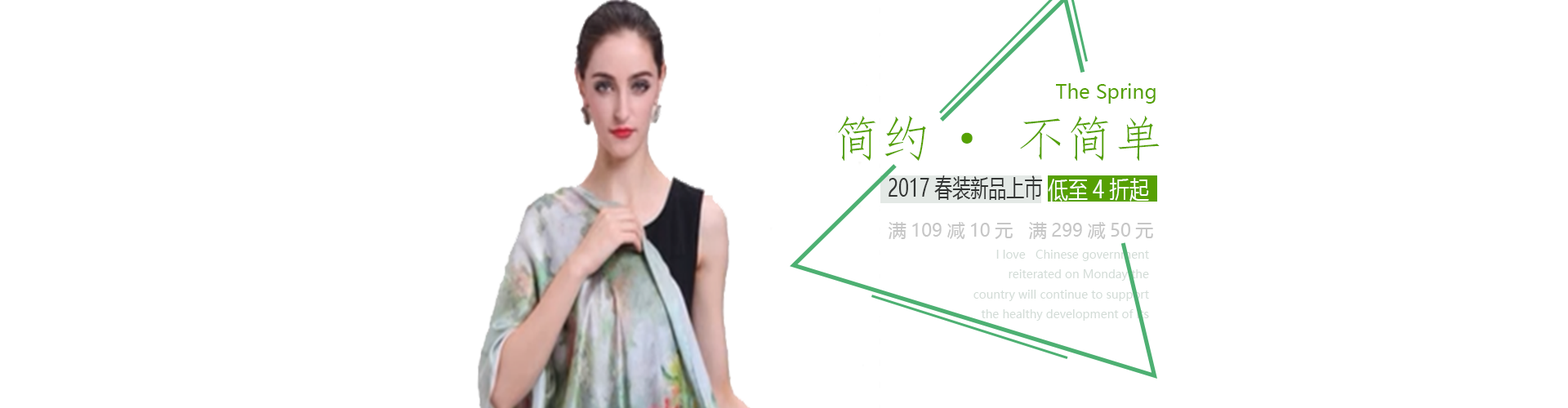
<style>
.page{position:relative;width:1568px;height:408px;background:#ffffff}
.page>*{position:absolute;margin:0}
.t1{font:19.6px "MicrosoftYaHei";color:#55a102}
.t2{font:49px "FangSong";color:#55a102}
.t3{font:24.5px "MicrosoftYaHei";color:#323433;scale:0.73 1}
.t4{font:24.5px "MicrosoftYaHei";color:#ffffff;scale:0.81 1}
.t5{font:18px "MicrosoftYaHei";color:#c6c6c6}
.t6{font:11.4px "MicrosoftYaHei";color:#d3dcd7}
</style>
<div class="page">
<p class="t1" style="left:1056px;top:83px;width:100px;height:21px">The Spring</p>
<p class="t2" style="left:838px;top:115px;width:322px;height:47px">简约· 不简单</p>
<p class="t3" style="left:889px;top:176px;width:154px;height:24px">2017春装新品上市</p>
<p class="t4" style="left:1048px;top:178px;width:101px;height:24px">低至4折起</p>
<p class="t5" style="left:889px;top:222px;width:264px;height:17px">满109减10元   满299减50元</p>
<p class="t6" style="left:973px;top:250px;width:176px;height:71px;text-align:right">I love   Chinese government reiterated on Monday the country will continue to support the healthy development of its <br>outbound investment after reports suggested it is guarding against money outflows disguised as foreign investment.</p>
</div>
